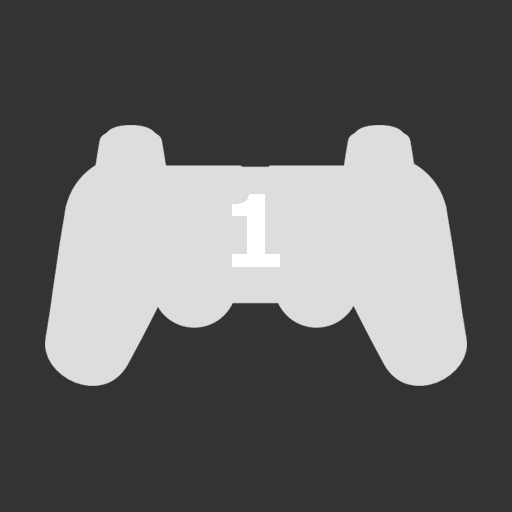
<style>
.page{position:relative;width:512px;height:512px;background:#333333}
.page>*{position:absolute;margin:0}
.t1{font:100px "Tahoma-Bold";color:#ffffff}
</style>
<div class="page">
<p class="t1" style="left:232px;top:194px;width:48px;height:73px">1</p>
</div>
